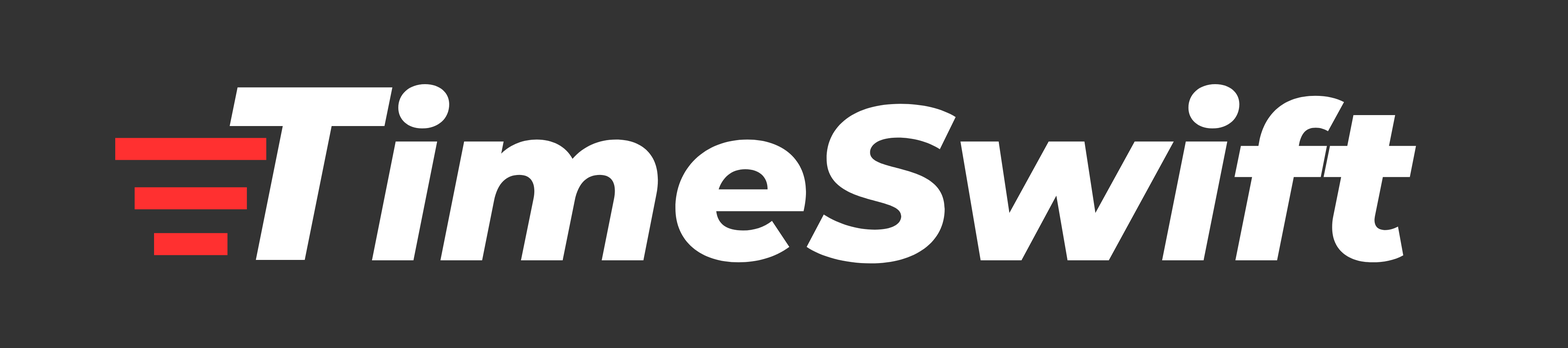
<style>
.page{position:relative;width:1568px;height:348px;background:#333333}
.page>*{position:absolute;margin:0}
.t1{font:246.9px "Montserrat-ExtraBoldItalic";color:#ffffff}
.t2{font:219.4px "Montserrat-ExtraBoldItalic";color:#ffffff}
</style>
<div class="page">
<p class="t1" style="left:229px;top:87px;width:163px;height:173px">T</p>
<p class="t2" style="left:372px;top:84px;width:1044px;height:180px">imeSwift</p>
</div>
